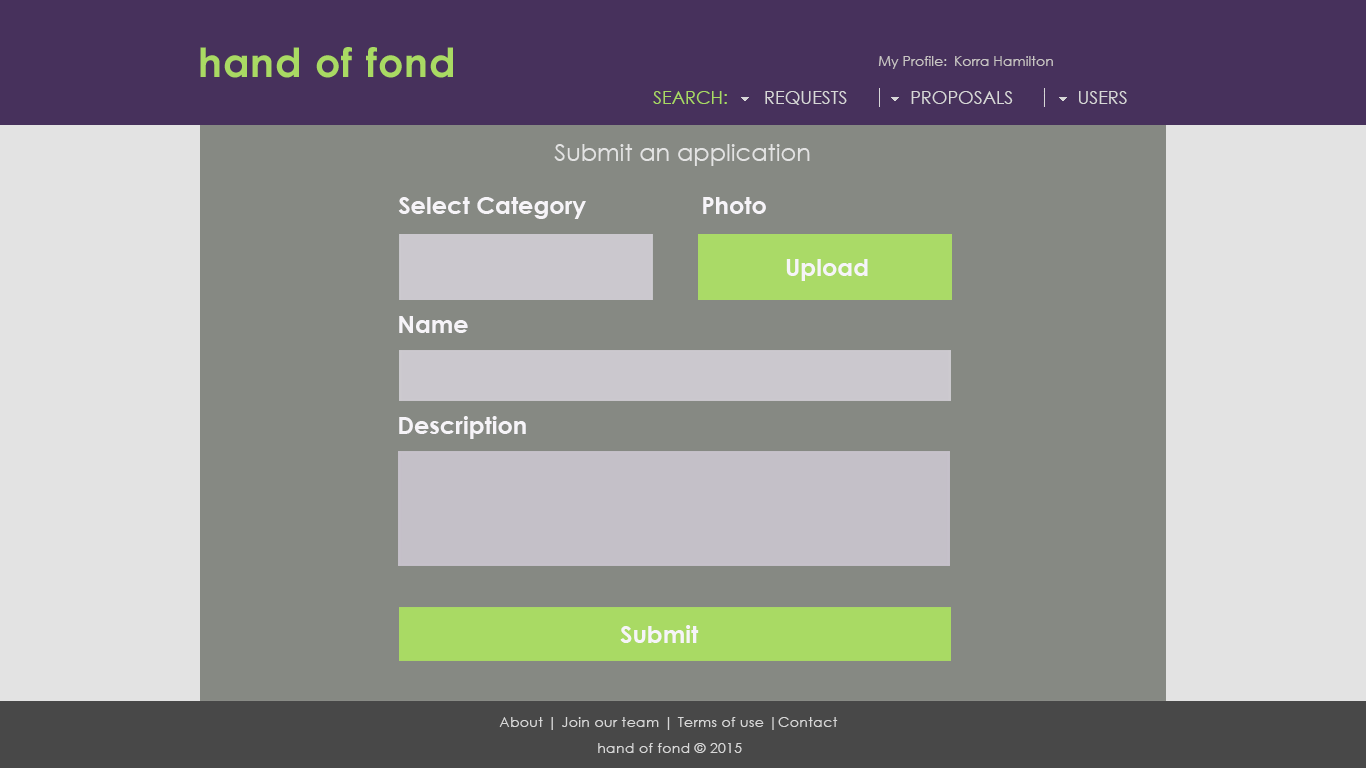
<style>
.page{position:relative;width:1366px;height:768px;background:#868983}
.page>*{position:absolute;margin:0}
.t1{font:14px "CenturyGothic";color:#c9c5c4}
.t2{font:18px "CenturyGothic";color:#a9da63}
.t3{font:18px "CenturyGothic";color:#d7d7d7}
.t4{font:24px "CenturyGothic";color:#e3e3e3}
.t5{font:24px "CenturyGothic-Bold";color:#f6f4f8}
.t6{font:14px "CenturyGothic";letter-spacing:0.025em;color:#d7d7d7}
</style>
<div class="page">
<p class="t1" style="left:878px;top:56px;width:69px;height:13px">My Profile:</p>
<p class="t1" style="left:955px;top:56px;width:98px;height:10px">Korra Hamilton</p>
<p class="t2" style="left:653px;top:91px;width:74px;height:13px">SEARCH:</p>
<p class="t3" style="left:765px;top:91px;width:82px;height:14px">REQUESTS</p>
<p class="t3" style="left:911px;top:91px;width:102px;height:13px">PROPOSALS</p>
<p class="t3" style="left:1079px;top:91px;width:48px;height:13px">USERS</p>
<p class="t4" style="left:554px;top:144px;width:256px;height:22px">Submit an application</p>
<p class="t5" style="left:398px;top:197px;width:188px;height:22px">Select Category</p>
<p class="t5" style="left:703px;top:197px;width:63px;height:17px">Photo</p>
<p class="t5" style="left:786px;top:259px;width:82px;height:22px">Upload</p>
<p class="t5" style="left:399px;top:316px;width:69px;height:17px">Name</p>
<p class="t5" style="left:399px;top:416px;width:127px;height:23px">Description</p>
<p class="t5" style="left:620px;top:625px;width:79px;height:18px">Submit</p>
<p class="t6" style="left:499px;top:717px;width:339px;height:13px">About | Join our team | Terms of use |Contact</p>
<p class="t6" style="left:598px;top:743px;width:144px;height:10px">hand of fond © 2015</p>
</div>
